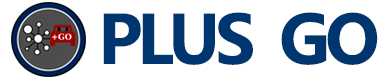
<style>
.page{position:relative;width:384px;height:80px;background:#ffffff}
.page>*{position:absolute;margin:0}
.t1{font:72.2px "MyanmarText-Bold";letter-spacing:-0.075em;color:#00366f;text-transform:uppercase}
</style>
<div class="page">
<p class="t1" style="left:103px;top:12px;width:275px;height:53px">PLUS  GO</p>
</div>
